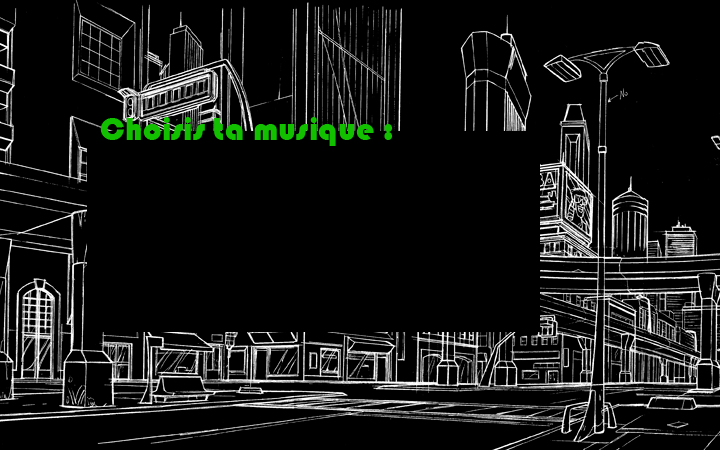
<style>
.page{position:relative;width:720px;height:450px;background:#000000}
.page>*{position:absolute;margin:0}
.t1{font:33.3px "Bauhaus93";color:#12c000}
</style>
<div class="page">
<p class="t1" style="left:100px;top:117px;width:293px;height:29px">Choisis ta musique :</p>
</div>
